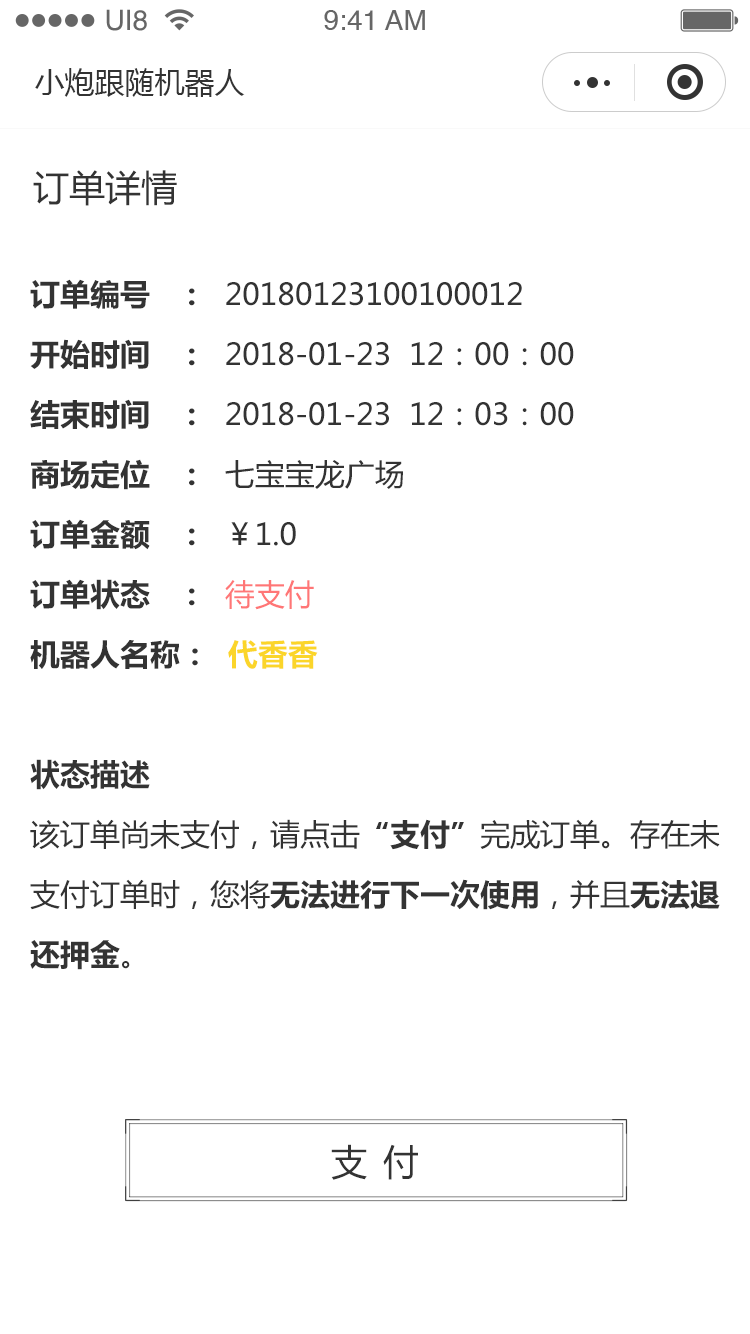
<style>
.page{position:relative;width:750px;height:1334px;background:#ffffff}
.page>*{position:absolute;margin:0}
.t1{font:28.1px "Helvetica";color:#666666}
.t2{font:30px "MicrosoftYaHei";color:#333333}
.t3{font:36px "MicrosoftYaHei";color:#333333}
.t4{font:30px/60px "MicrosoftYaHei";color:#333333}
.t5{font:30px/60px "MicrosoftYaHei-Bold";color:#333333}
.t6{font:30px/60px "MicrosoftYaHei";color:#ff7676}
.t7{font:30px/60px "MicrosoftYaHei-Bold";color:#fbd52a}
.t8{font:36px "MicrosoftYaHei";letter-spacing:0.44em;color:#333333}
</style>
<div class="page">
<p class="t1" style="left:106px;top:9px;width:41px;height:22px">UI8</p>
<p class="t1" style="left:324px;top:10px;width:101px;height:20px">9:41 AM</p>
<p class="t2" style="left:35px;top:68px;width:210px;height:29px">小炮跟随机器人</p>
<p class="t3" style="left:33px;top:170px;width:144px;height:36px">订单详情</p>
<p class="t4" style="left:30px;top:279px;width:690px;height:691px;text-align:justify"><span class="t5">订单编号   ：  </span>20180123100100012<br><span class="t5">开始时间   ：  </span>2018-01-23  12：00：00<br><span class="t5">结束时间   ：  </span>2018-01-23  12：03：00<br><span class="t5">商场定位   ：  </span>七宝宝龙广场<br><span class="t5">订单金额   ：  </span>￥1.0<br><span class="t5">订单状态   ：  </span><span class="t6">待支付<br></span><span class="t5">机器人名称：  </span><span class="t7">代香香<br></span><span class="t5"><br>状态描述<br></span>该订单尚未支付，请点击<span class="t5">“支付”</span>完成订单。存在未支付订单时，您将<span class="t5">无法进行下一次使用</span>，并且<span class="t5">无法退还押金</span>。</p>
<p class="t8" style="left:331px;top:1144px;width:87px;height:36px">支付</p>
</div>
